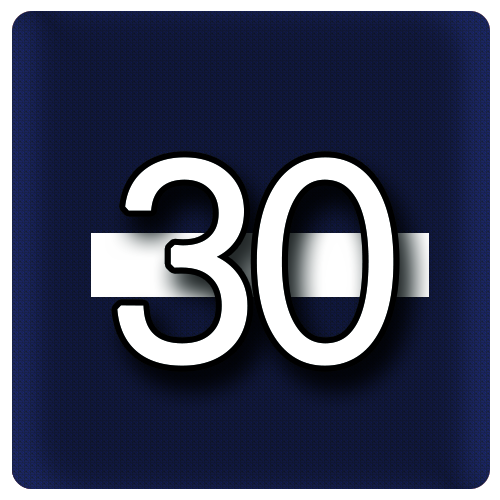
<style>
.page{position:relative;width:500px;height:500px}
.page>*{position:absolute;margin:0}
.t1{font:270.8px "FuturaBT-Light";letter-spacing:-0.09em;color:#ffffff;font-weight:bold}
</style>
<div class="page">
<p class="t1" style="left:117px;top:157px;width:277px;height:209px">30</p>
</div>
